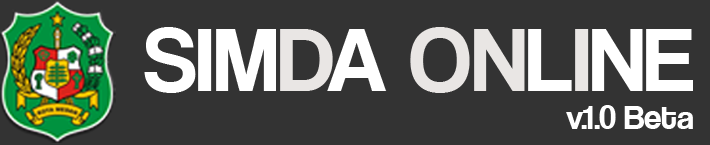
<style>
.page{position:relative;width:710px;height:145px;background:#333333}
.page>*{position:absolute;margin:0}
.t1{font:93.3px "CoolveticaRg-Regular";color:#ffffff}
.t2{font:93.3px "CoolveticaRg-Regular";color:#e9e6e4}
.t3{font:34.7px "CoolveticaRg-Regular";color:#ffffff}
</style>
<div class="page">
<p class="t1" style="left:144px;top:27px;width:549px;height:66px">SIM<span class="t2">D</span>A <span class="t2">ON</span>L<span class="t2">I</span>NE</p>
<p class="t3" style="left:566px;top:105px;width:127px;height:24px">v.1.0 Beta</p>
</div>
